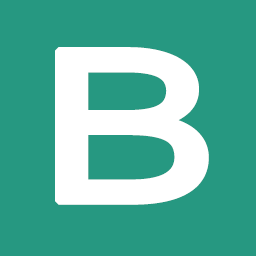
<style>
.page{position:relative;width:256px;height:256px;background:#269881}
.page>*{position:absolute;margin:0}
.t1{font:233px "Latha";color:#ffffff;font-weight:bold;scale:1.3 1}
</style>
<div class="page">
<p class="t1" style="left:55px;top:47px;width:154px;height:158px">B</p>
</div>
